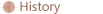
<style>
.page{position:relative;width:103px;height:14px;background:#ffffff}
.page>*{position:absolute;margin:0}
.t1{font:12px "MicrosoftYaHei";color:#9d7065}
</style>
<div class="page">
<p class="t1" style="left:20px;top:1px;width:41px;height:13px">History</p>
</div>
